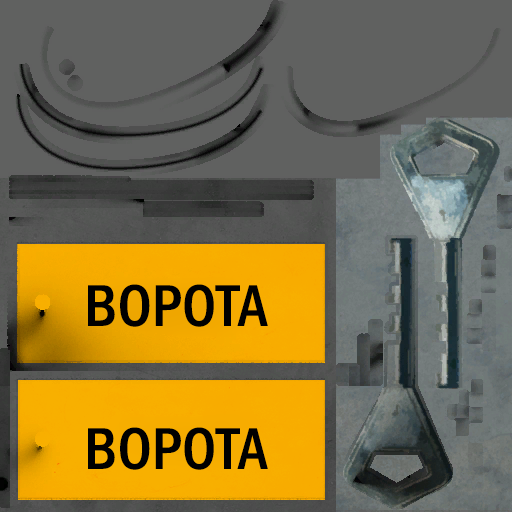
<style>
.page{position:relative;width:512px;height:512px;background:#606160}
.page>*{position:absolute;margin:0}
.t1{font:59px "FranklinGothicMediCondSCC";color:#000000}
</style>
<div class="page">
<p class="t1" style="left:88px;top:284px;width:180px;height:43px">ВОРОТА</p>
<p class="t1" style="left:88px;top:427px;width:180px;height:43px">ВОРОТА</p>
</div>
